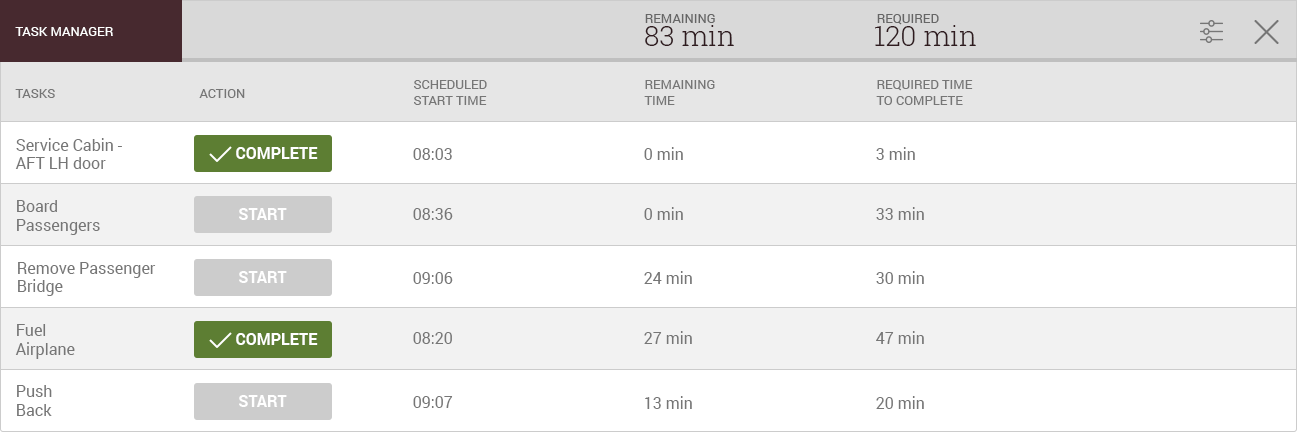
<style>
.page{position:relative;width:1297px;height:432px;background:#ffffff}
.page>*{position:absolute;margin:0}
.t1{font:13px "Roboto-Regular";color:#666666;text-transform:uppercase}
.t2{font:13px "Roboto-Regular";color:#ffffff;text-transform:uppercase}
.t3{font:28px "RobotoSlab-Light";color:#2f1b1f}
.t4{font:13px "Roboto-Regular";color:#767676;text-transform:uppercase}
.t5{font:16px/18px "Roboto-Regular";color:#767676}
.t6{font:16px "Roboto-Bold";color:#ffffff;text-transform:uppercase}
.t7{font:16px "Roboto-Regular";color:#767676}
</style>
<div class="page">
<p class="t1" style="left:645px;top:14px;width:70px;height:9px">remaining</p>
<p class="t1" style="left:877px;top:14px;width:62px;height:11px">Required</p>
<p class="t2" style="left:15px;top:27px;width:98px;height:9px">Task Manager</p>
<p class="t3" style="left:645px;top:25px;width:89px;height:21px">83 min</p>
<p class="t3" style="left:875px;top:25px;width:101px;height:21px">120 min</p>
<p class="t4" style="left:15px;top:89px;width:40px;height:9px">tasks</p>
<p class="t4" style="left:199px;top:89px;width:46px;height:9px">Action</p>
<p class="t4" style="left:414px;top:80px;width:73px;height:25px">Scheduled<br>Start Time</p>
<p class="t4" style="left:644px;top:80px;width:71px;height:25px">Remaining<br>Time</p>
<p class="t4" style="left:876px;top:80px;width:97px;height:25px">Required Time<br>To Complete</p>
<p class="t5" style="left:15px;top:138px;width:107px;height:31px">Service Cabin -<br>AFT LH door</p>
<p class="t6" style="left:236px;top:147px;width:82px;height:12px">Complete</p>
<p class="t7" style="left:413px;top:148px;width:39px;height:12px">08:03</p>
<p class="t7" style="left:644px;top:147px;width:39px;height:13px">0 min</p>
<p class="t7" style="left:876px;top:147px;width:39px;height:13px">3 min</p>
<p class="t7" style="left:17px;top:200px;width:83px;height:35px">Board<br>Passengers</p>
<p class="t6" style="left:239px;top:208px;width:48px;height:12px">Start</p>
<p class="t7" style="left:413px;top:208px;width:40px;height:12px">08:36</p>
<p class="t7" style="left:644px;top:207px;width:39px;height:13px">0 min</p>
<p class="t7" style="left:876px;top:207px;width:48px;height:13px">33 min</p>
<p class="t5" style="left:18px;top:262px;width:138px;height:34px">Remove Passenger<br>Bridge</p>
<p class="t6" style="left:239px;top:271px;width:48px;height:12px">Start</p>
<p class="t7" style="left:413px;top:272px;width:40px;height:12px">09:06</p>
<p class="t7" style="left:644px;top:271px;width:48px;height:13px">24 min</p>
<p class="t7" style="left:876px;top:271px;width:48px;height:13px">30 min</p>
<p class="t7" style="left:15px;top:324px;width:60px;height:35px">Fuel<br>Airplane</p>
<p class="t6" style="left:236px;top:333px;width:82px;height:12px">Complete</p>
<p class="t7" style="left:413px;top:332px;width:39px;height:12px">08:20</p>
<p class="t7" style="left:644px;top:331px;width:48px;height:13px">27 min</p>
<p class="t7" style="left:876px;top:331px;width:48px;height:13px">47 min</p>
<p class="t7" style="left:17px;top:385px;width:35px;height:31px">Push<br>Back</p>
<p class="t6" style="left:239px;top:395px;width:48px;height:12px">Start</p>
<p class="t7" style="left:413px;top:396px;width:40px;height:12px">09:07</p>
<p class="t7" style="left:645px;top:396px;width:47px;height:13px">13 min</p>
<p class="t7" style="left:876px;top:396px;width:48px;height:13px">20 min</p>
</div>
